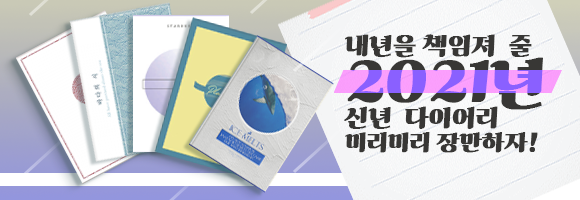
<style>
.page{position:relative;width:580px;height:200px}
.page>*{position:absolute;margin:0}
.t1{font:23.9px/20.3px "ghanachoco";color:#383735;font-weight:bold}
.t2{font:57.3px/23.9px "ghanachoco";color:#383735;font-weight:bold}
.t3{font:57.3px/20.3px "ghanachoco";color:#383735;font-weight:bold}
.t4{font:23.9px/23.9px "ghanachoco";color:#383735;font-weight:bold}
.t5{font:22px/23.9px "ghanachoco";color:#383735;font-weight:bold}
.t6{font:22px/20.3px "ghanachoco";color:#383735;font-weight:bold}
</style>
<div class="page">
<p class="t1" style="left:344px;top:34px;width:199px;height:119px">내년을 책임져  줄<br><span class="t2"><br>2021</span><span class="t3">년<br></span><span class="t4">신년  다이어리<br></span><span class="t5">미</span><span class="t6">리미리 장만하자!</span></p>
</div>
